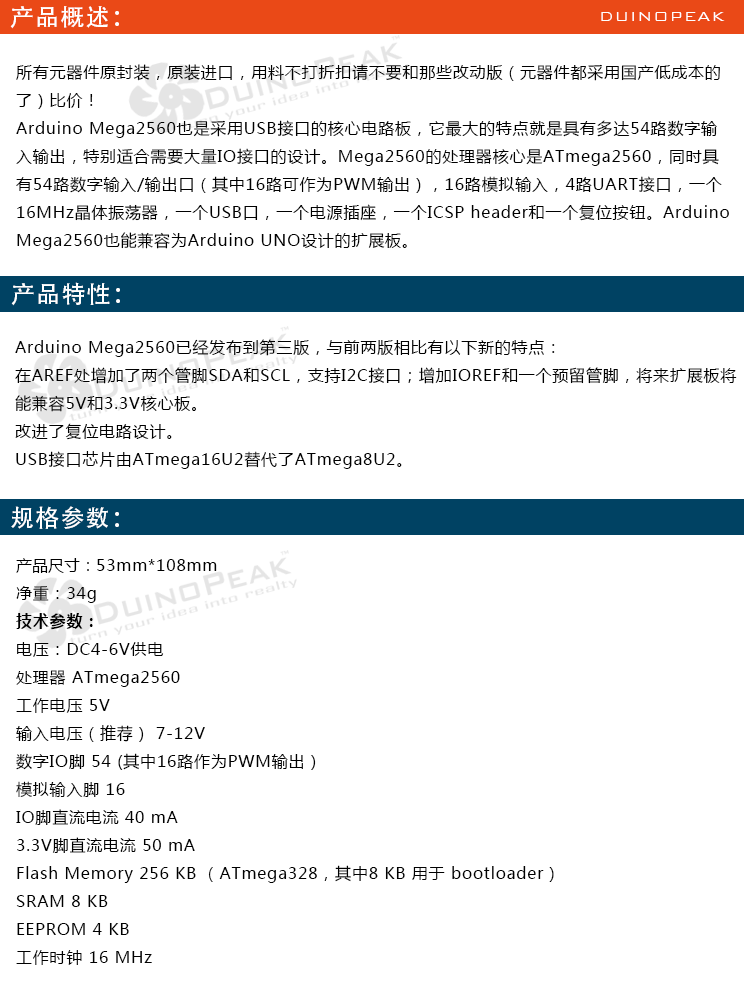
<style>
.page{position:relative;width:744px;height:992px;background:#ffffff}
.page>*{position:absolute;margin:0}
.t1{font:24px "AdobeHeitiStd-Regular";letter-spacing:0.05em;color:#ffffff}
.t2{font:18px "BankGothicBT-Light";letter-spacing:0.05em;color:#ffffff}
.t3{font:16px "MicrosoftYaHei";letter-spacing:0.05em;color:#000000}
.t4{font:16px "MicrosoftYaHei";color:#000000}
.t5{font:16px "MicrosoftYaHei-Bold";letter-spacing:0.05em;color:#000000}
</style>
<div class="page">
<p class="t1" style="left:10px;top:6px;width:109px;height:23px">产品概述：</p>
<p class="t2" style="left:601px;top:12px;width:124px;height:9px">DUINOPEAK</p>
<p class="t3" style="left:16px;top:64px;width:713px;height:186px">所有元器件原封装，原装进口，用料不打折扣请不要和那些改动版（元器件都采用国产低成本的<br>了）比价！<br>Arduino Mega2560也是采用USB接口的核心电路板，它最大的特点就是具有多达54路数字输<br>入输出，特别适合需要大量IO接口的设计。Mega2560的处理器核心是ATmega2560，同时具<br>有54路数字输入/输出口（其中16路可作为PWM输出），16路模拟输入，4路UART接口，一个<br>16MHz晶体振荡器，一个USB口，一个电源插座，一个ICSP header和一个复位按钮。Arduino <br>Mega2560也能兼容为Arduino UNO设计的扩展板。</p>
<p class="t1" style="left:11px;top:282px;width:109px;height:24px">产品特性：</p>
<p class="t3" style="left:15px;top:339px;width:722px;height:130px">Arduino Mega2560已经发布到第三版，与前两版相比有以下新的特点：<br>在AREF处增加了两个管脚SDA和SCL，支持I2C接口；增加IOREF和一个预留管脚，将来扩展板将<br>能兼容5V和3.3V核心板。<br>改进了复位电路设计。<br>USB接口芯片由ATmega16U2替代了ATmega8U2。</p>
<p class="t1" style="left:11px;top:506px;width:108px;height:23px">规格参数：</p>
<p class="t3" style="left:16px;top:558px;width:538px;height:407px"><span class="t4">产品尺寸：</span>53mm*108mm<br>净重：34g<br><span class="t5">技术参数：<br></span>电压：DC4-6V供电<br>处理器 ATmega2560<br>工作电压 5V<br>输入电压（推荐） 7-12V<br>数字IO脚 54 (其中16路作为PWM输出）<br>模拟输入脚 16<br>IO脚直流电流 40 mA<br>3.3V脚直流电流 50 mA<br>Flash Memory 256 KB （ATmega328，其中8 KB 用于 bootloader）<br>SRAM 8 KB<br>EEPROM 4 KB<br>工作时钟 16 MHz</p>
</div>
